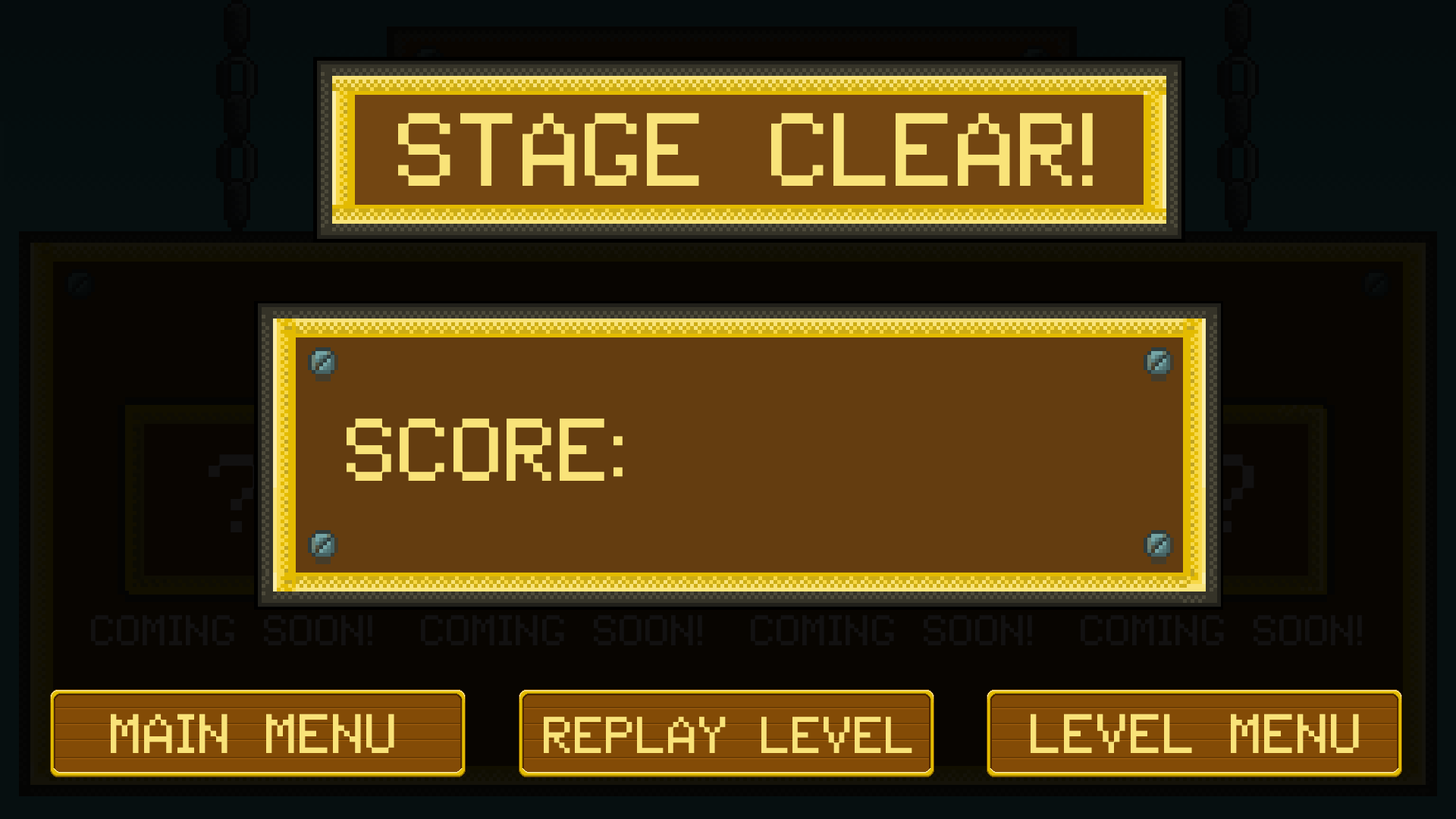
<style>
.page{position:relative;width:1456px;height:819px}
.page>*{position:absolute;margin:0}
.t1{font:106.2px "Tandysoft";color:#f9e379}
.t2{font:91px "Tandysoft";color:#f9e379}
.t3{font:56.9px "Tandysoft";color:#f9e379}
.t4{font:53.1px "Tandysoft";color:#f9e379}
</style>
<div class="page">
<p class="t1" style="left:398px;top:113px;width:695px;height:73px">stage clear!</p>
<p class="t2" style="left:347px;top:418px;width:276px;height:63px">score:</p>
<p class="t3" style="left:111px;top:714px;width:283px;height:39px">main menu</p>
<p class="t3" style="left:1031px;top:714px;width:328px;height:39px">Level menu</p>
<p class="t4" style="left:544px;top:717px;width:368px;height:36px">replay level</p>
</div>
